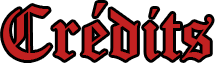
<style>
.page{position:relative;width:215px;height:63px;background:#ffffff}
.page>*{position:absolute;margin:0}
.t1{font:72px "OldEnglishTextMT";color:#c22121}
</style>
<div class="page">
<p class="t1" style="left:3px;top:3px;width:209px;height:57px">Crédits</p>
</div>
